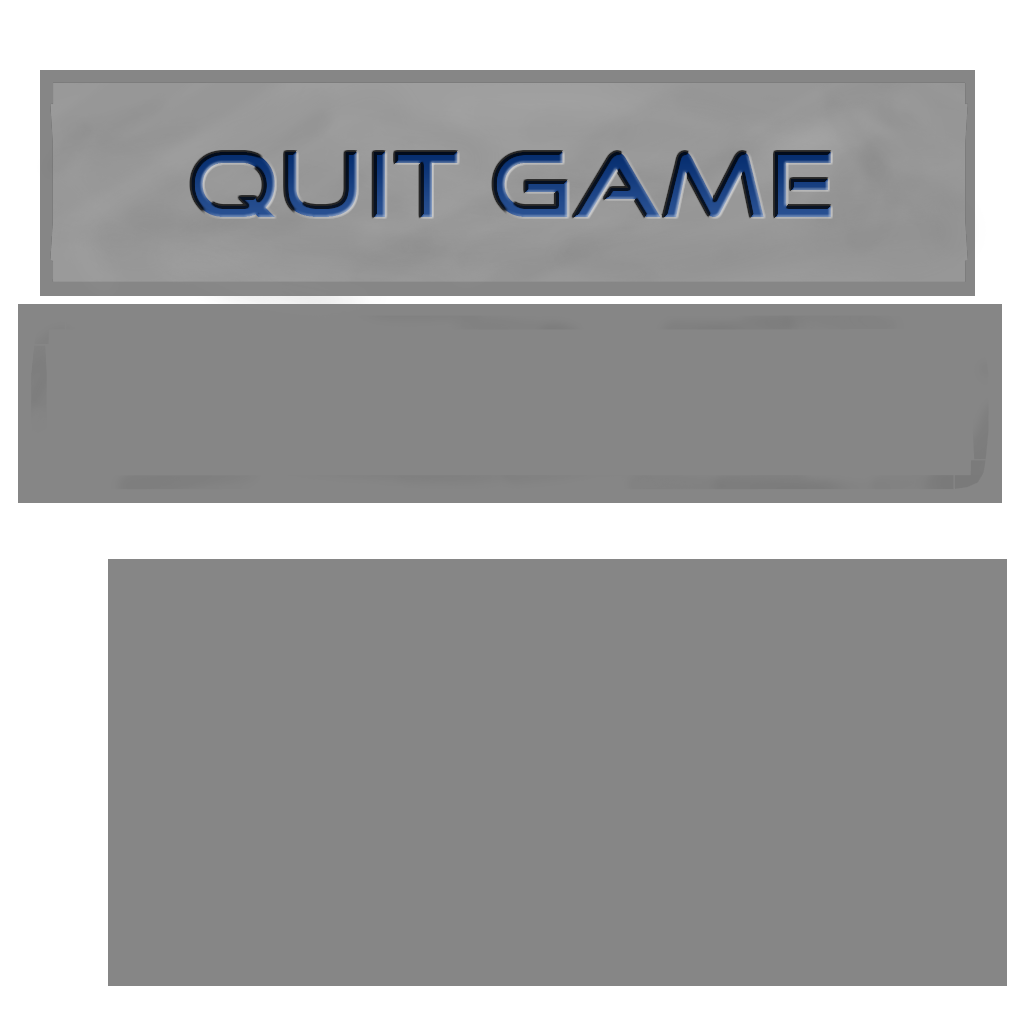
<style>
.page{position:relative;width:1024px;height:1024px;background:#868686}
.page>*{position:absolute;margin:0}
.t1{font:90px "GoodTimes"}
</style>
<div class="page">
<p class="t1" style="left:191px;top:152px;width:640px;height:65px">quit game</p>
</div>
